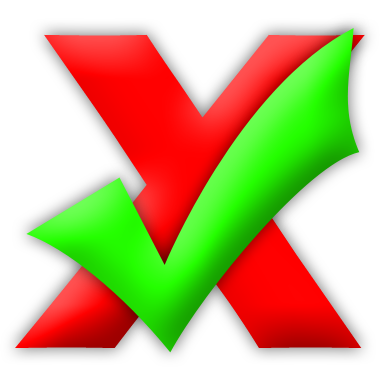
<style>
.page{position:relative;width:380px;height:380px;background:#ffffff}
.page>*{position:absolute;margin:0}
.t1{font:630.6px "ErasITC-Demi"}
</style>
<div class="page">
<p class="t1" style="left:15px;top:34px;width:350px;height:314px">x</p>
</div>
